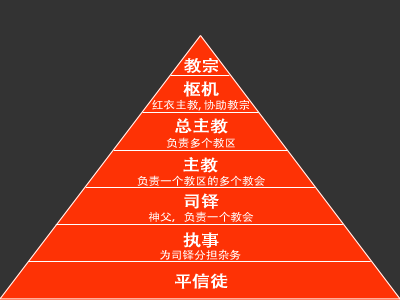
<style>
.page{position:relative;width:400px;height:300px;background:#333333}
.page>*{position:absolute;margin:0}
.t1{font:16.2px "AdobeHeitiStd-Regular";letter-spacing:-0.025em;color:#ffffff;font-weight:bold;scale:1.11 1}
.t2{font:10.8px "AdobeHeitiStd-Regular";letter-spacing:-0.025em;color:#ffffff;scale:1.11 1}
</style>
<div class="page">
<p class="t1" style="left:184px;top:58px;width:34px;height:15px">教宗</p>
<p class="t1" style="left:183px;top:81px;width:36px;height:16px">枢机</p>
<p class="t2" style="left:152px;top:99px;width:98px;height:12px">红衣主教, 协助教宗</p>
<p class="t1" style="left:175px;top:118px;width:53px;height:16px">总主教</p>
<p class="t2" style="left:166px;top:137px;width:69px;height:11px">负责多个教区</p>
<p class="t1" style="left:183px;top:157px;width:35px;height:16px">主教</p>
<p class="t2" style="left:137px;top:175px;width:128px;height:11px">负责一个教区的多个教会</p>
<p class="t1" style="left:184px;top:193px;width:35px;height:16px">司铎</p>
<p class="t2" style="left:148px;top:211px;width:106px;height:11px">神父，负责一个教会</p>
<p class="t1" style="left:183px;top:232px;width:36px;height:16px">执事</p>
<p class="t2" style="left:160px;top:249px;width:81px;height:11px">为司铎分担杂务</p>
<p class="t1" style="left:175px;top:273px;width:53px;height:16px">平信徒</p>
</div>
